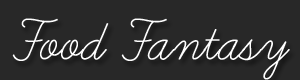
<style>
.page{position:relative;width:300px;height:80px;background:#282828}
.page>*{position:absolute;margin:0}
.t1{font:72px "LearningCurve";color:#ffffff}
</style>
<div class="page">
<p class="t1" style="left:12px;top:18px;width:278px;height:62px">Food Fantasy</p>
</div>
